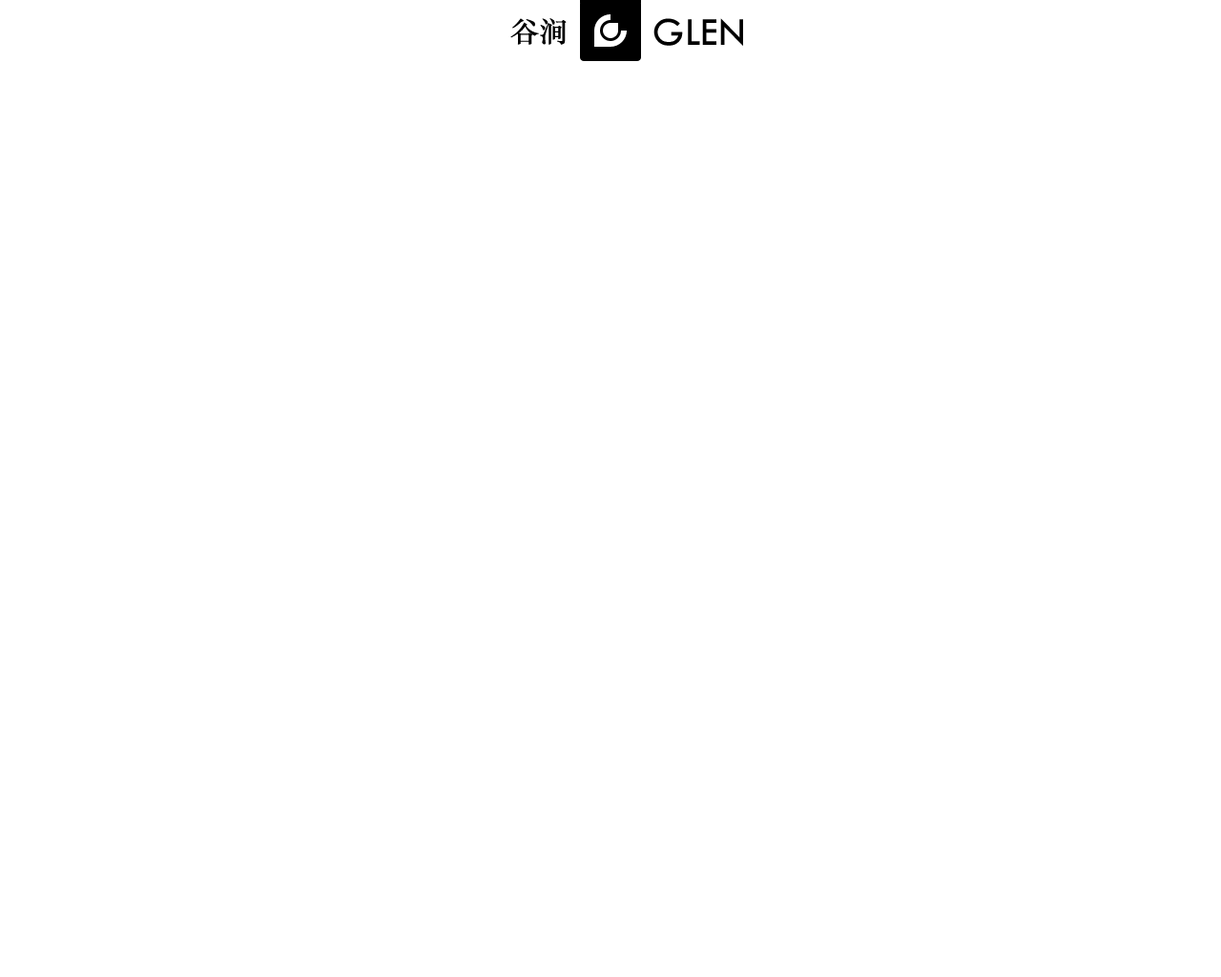
<style>
.page{position:relative;width:1221px;height:977px;background:#ffffff}
.page>*{position:absolute;margin:0}
.t1{font:28.6px "STZhongsong";color:#000000}
.t2{font:41px "TwCenMT-Regular";color:#000000}
</style>
<div class="page">
<p class="t1" style="left:510px;top:18px;width:57px;height:27px">谷涧</p>
<p class="t2" style="left:653px;top:18px;width:90px;height:28px">GLEN</p>
</div>
